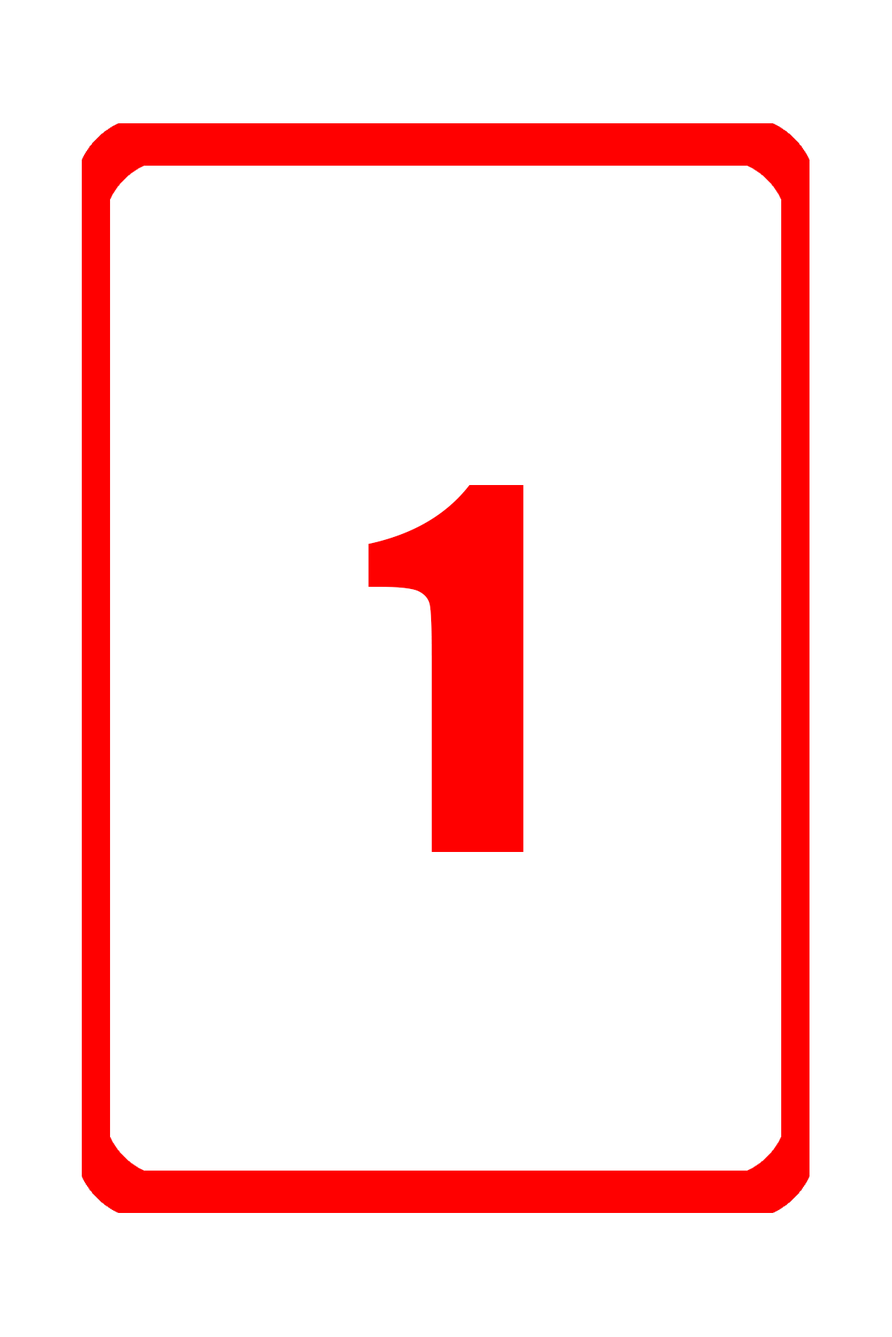
<style>
.page{position:relative;width:892px;height:1337px;background:#ffffff}
.page>*{position:absolute;margin:0}
.t1{font:464.4px "Impact";color:#ff0000}
</style>
<div class="page">
<p class="t1" style="left:368px;top:485px;width:156px;height:367px">1</p>
</div>
